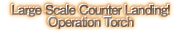
<style>
.page{position:relative;width:179px;height:32px;background:#ffffff}
.page>*{position:absolute;margin:0}
.t1{font:13px/12px "FutoGoB101Pr5-Bold";letter-spacing:-0.08em;font-weight:bold}
.t2{font:13px/12px "FutoGoB101Pr5-Bold";letter-spacing:-0.08em;color:#7f6951;font-weight:bold}
</style>
<div class="page">
<p class="t1" style="left:11px;top:3px;width:158px;height:25px;text-align:center">Large Scale Counter Landing!<br>Operation Torch</p>
<p class="t2" style="left:12px;top:4px;width:158px;height:25px;text-align:center">Large Scale Counter Landing!<br>Operation Torch</p>
</div>
